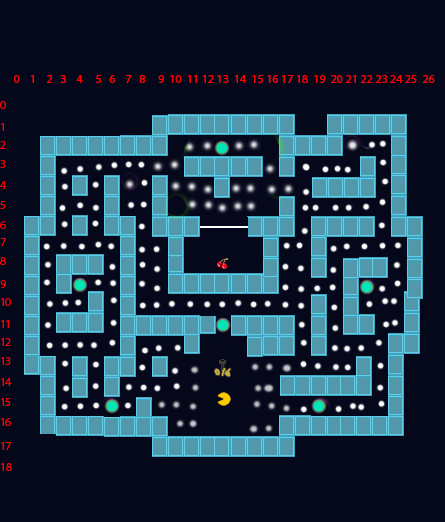
<style>
.page{position:relative;width:445px;height:522px;background:#05071b}
.page>*{position:absolute;margin:0}
.t1{font:12px "MyriadPro-Regular";color:#ff0000}
</style>
<div class="page">
<p class="t1" style="left:14px;top:75px;width:421px;height:8px">0    1    2   3    4     5   6    7   8     9  10  11 12 13  14  15 16 17 18  19  20 21 22 23 24 25  26</p>
</div>
